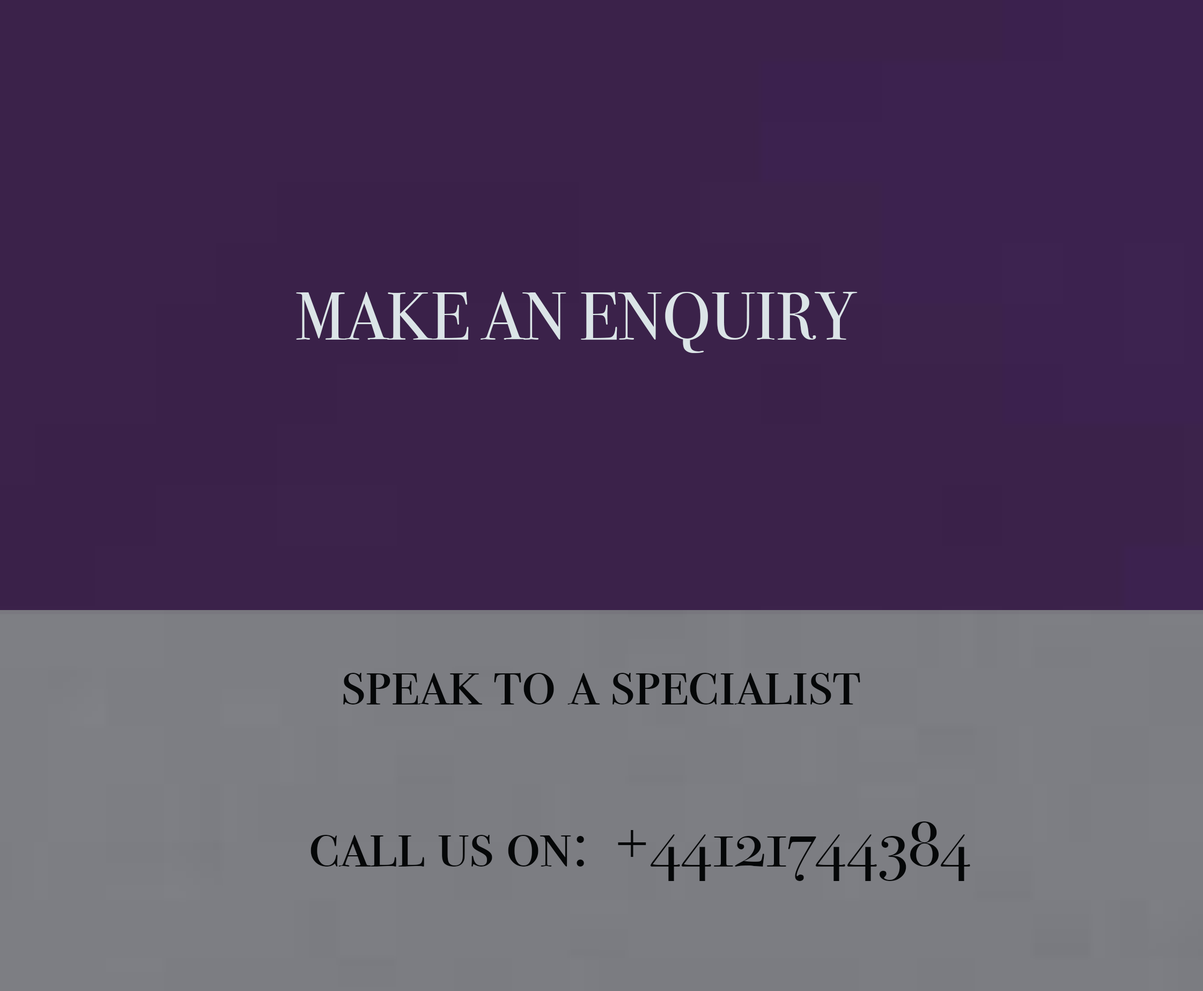
<style>
.page{position:relative;width:1203px;height:991px;background:#3b224a}
.page>*{position:absolute;margin:0}
.t1{font:67.1px "BodoniSvtyTwoSCITCTT-Book";color:#dbe4e7}
.t2{font:67.1px "BodoniSvtyTwoSCITCTT-Book";color:#050708}
</style>
<div class="page">
<p class="t1" style="left:296px;top:291px;width:562px;height:62px">MAKE AN ENQUIRY</p>
<p class="t2" style="left:343px;top:673px;width:518px;height:31px">speak to a specialist</p>
<p class="t2" style="left:311px;top:821px;width:660px;height:60px">call us on:  +44121744384</p>
</div>
